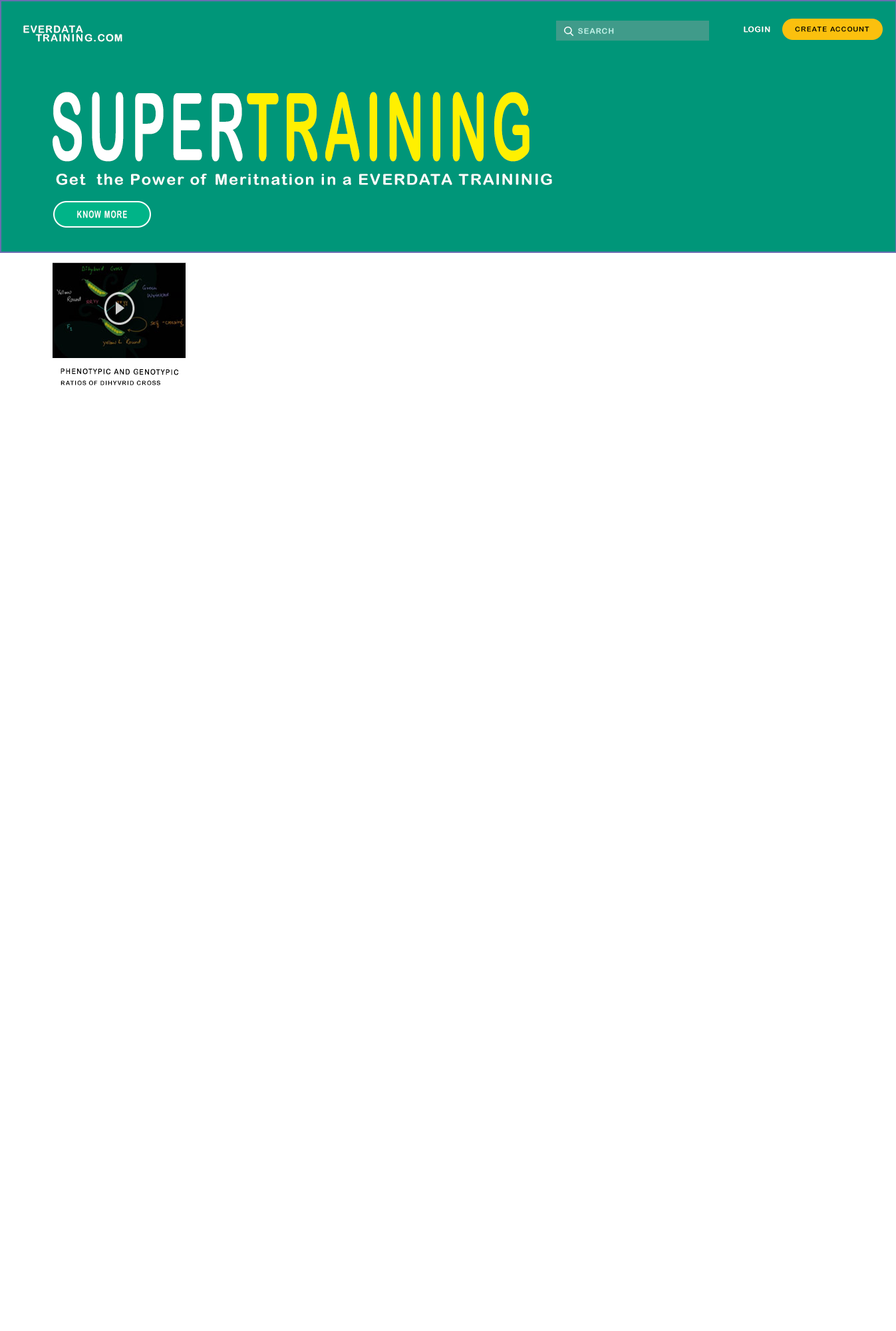
<style>
.page{position:relative;width:896px;height:1331px;background:#ffffff}
.page>*{position:absolute;margin:0}
.t1{font:17.3px "ArialRoundedMTBold";letter-spacing:0.08em;color:#ffffff}
.t2{font:13.3px "ArialRoundedMTBold";letter-spacing:0.08em;color:#bbefe5}
.t3{font:13.3px "ArialRoundedMTBold";letter-spacing:0.08em;color:#ffffff}
.t4{font:12px "ArialRoundedMTBold";letter-spacing:0.08em;color:#000000}
.t5{font:160.1px "ArialRoundedMTBold";letter-spacing:0.08em;color:#fff000;scale:0.55 1}
.t6{font:160.1px "ArialRoundedMTBold";letter-spacing:0.08em;color:#ffffff;scale:0.55 1}
.t7{font:25.5px "ArialRoundedMTBold";letter-spacing:0.08em;color:#fafefd;scale:1.07 1}
.t8{font:17.3px "ArialRoundedMTBold";letter-spacing:0.08em;color:#fafefd;scale:0.69 1}
.t9{font:13.3px "ArialRoundedMTBold";letter-spacing:0.08em;color:#000000;scale:0.89 1}
.t10{font:10.6px "ArialRoundedMTBold";letter-spacing:0.08em;color:#000000}
</style>
<div class="page">
<p class="t1" style="left:23px;top:25px;width:60px;height:8px">EVERDATA</p>
<p class="t2" style="left:578px;top:28px;width:36px;height:6px">SEARCH</p>
<p class="t3" style="left:744px;top:26px;width:26px;height:7px">LOGIN</p>
<p class="t4" style="left:795px;top:27px;width:75px;height:5px">CREATE ACCOUNT</p>
<p class="t1" style="left:35px;top:34px;width:87px;height:8px">TRAINING.COM</p>
<p class="t5" style="left:53px;top:92px;width:477px;height:70px"><span class="t6">SUPER</span>TRAINING</p>
<p class="t7" style="left:56px;top:174px;width:496px;height:11px">Get  the Power of Meritnation in a EVERDATA TRAININIG</p>
<p class="t8" style="left:77px;top:210px;width:50px;height:8px">KNOW MORE</p>
<p class="t9" style="left:61px;top:368px;width:117px;height:7px;rotate:1deg">PHENOTYPIC AND GENOTYPIC</p>
<p class="t10" style="left:61px;top:381px;width:99px;height:4px">RATIOS OF DIHYVRID CROSS</p>
</div>
